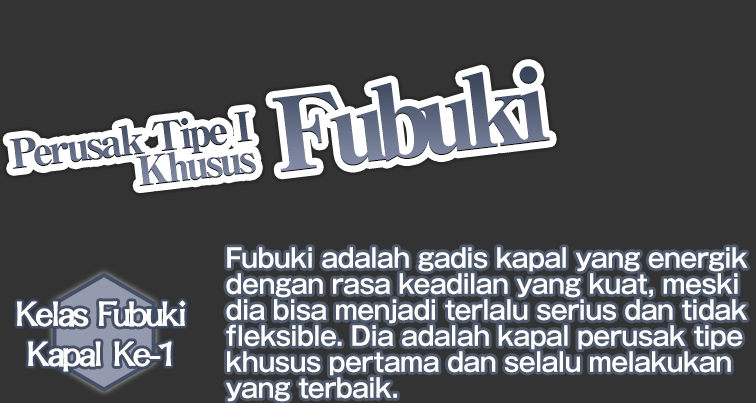
<style>
.page{position:relative;width:756px;height:403px;background:#333333}
.page>*{position:absolute;margin:0}
.t1{font:26px/26px "GothicMB101Pro-DeBold";letter-spacing:-0.02em;color:#fdfdfd;scale:0.95 1}
.t2{font:40px/40px "DFLungMen-W9-WINP-BF";letter-spacing:-0.09em;color:#fdfdfd;font-weight:bold}
</style>
<div class="page">
<p class="t1" style="left:226px;top:247px;width:522px;height:155px">Fubuki adalah gadis kapal yang energik<br>dengan rasa keadilan yang kuat, meski<br>dia bisa menjadi terlalu serius dan tidak<br>fleksible. Dia adalah kapal perusak tipe<br>khusus pertama dan selalu melakukan<br>yang terbaik.</p>
<p class="t2" style="left:17px;top:300px;width:169px;height:72px;text-align:center">Kelas Fubuki<br>Kapal Ke-1</p>
</div>
